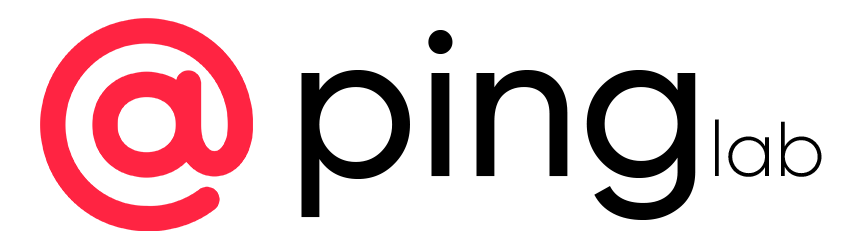
<style>
.page{position:relative;width:861px;height:250px;background:#ffffff}
.page>*{position:absolute;margin:0}
.t1{font:205.3px "Gilroy-Medium";color:#000000}
.t2{font:77.3px "Gilroy-Light";color:#000000}
</style>
<div class="page">
<p class="t1" style="left:301px;top:30px;width:521px;height:190px">ping<span class="t2">lab</span></p>
</div>
